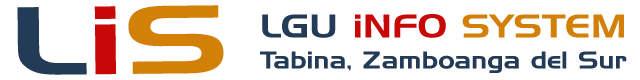
<style>
.page{position:relative;width:640px;height:80px;background:#ffffff}
.page>*{position:absolute;margin:0}
.t1{font:94.1px "HandelGothicBT-Regular";color:#233b56;scale:1.47 1}
.t2{font:94.1px "HandelGothicBT-Regular";color:#c80707;scale:1.47 1}
.t3{font:94.1px "HandelGothicBT-Regular";color:#d38008;scale:1.47 1}
.t4{font:32px "HandelGothicBT-Regular";color:#d38008;scale:1.18 1}
.t5{font:32px "HandelGothicBT-Regular";color:#233b56;scale:1.18 1}
.t6{font:32px "HandelGothicBT-Regular";color:#c80707;scale:1.18 1}
.t7{font:23.7px "HandelGothicBT-Regular";color:#233b56;scale:1.12 1}
</style>
<div class="page">
<p class="t1" style="left:17px;top:5px;width:207px;height:70px;rotate:-1deg">L<span class="t2">i</span><span class="t3">S</span></p>
<p class="t4" style="left:262px;top:14px;width:362px;height:24px"><span class="t5">LGU </span><span class="t6">iNFO </span>SYSTEM</p>
<p class="t7" style="left:260px;top:51px;width:367px;height:22px">Tabina, Zamboanga del Sur</p>
</div>
